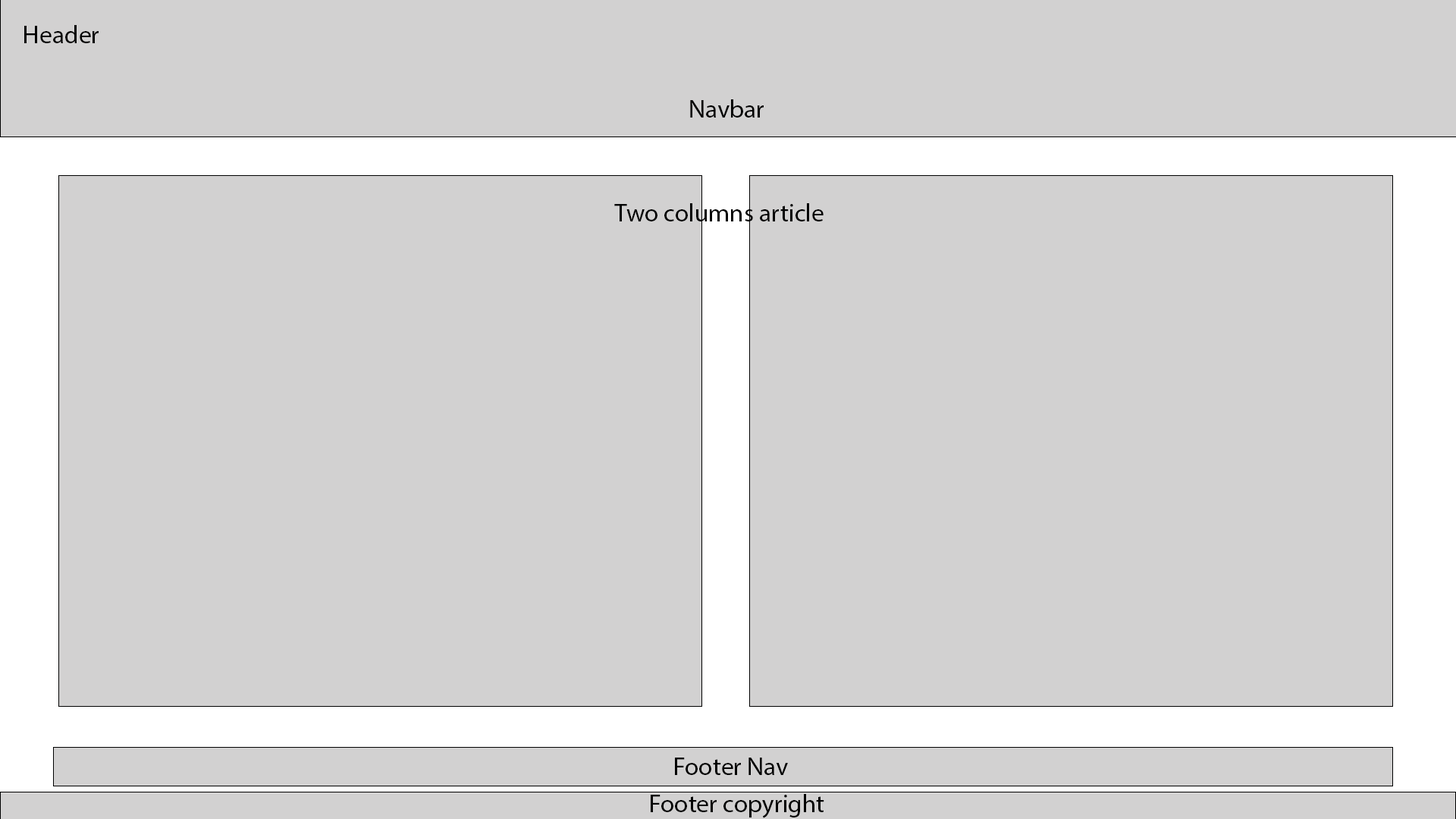
<style>
.page{position:relative;width:1456px;height:819px;background:#d2d1d1}
.page>*{position:absolute;margin:0}
.t1{font:25.3px "MyriadPro-Regular";color:#000000}
</style>
<div class="page">
<p class="t1" style="left:24px;top:25px;width:75px;height:18px">Header</p>
<p class="t1" style="left:690px;top:99px;width:74px;height:19px">Navbar</p>
<p class="t1" style="left:614px;top:203px;width:210px;height:18px">Two columns article</p>
<p class="t1" style="left:675px;top:758px;width:113px;height:17px">Footer Nav</p>
<p class="t1" style="left:651px;top:794px;width:173px;height:24px">Footer copyright</p>
</div>
